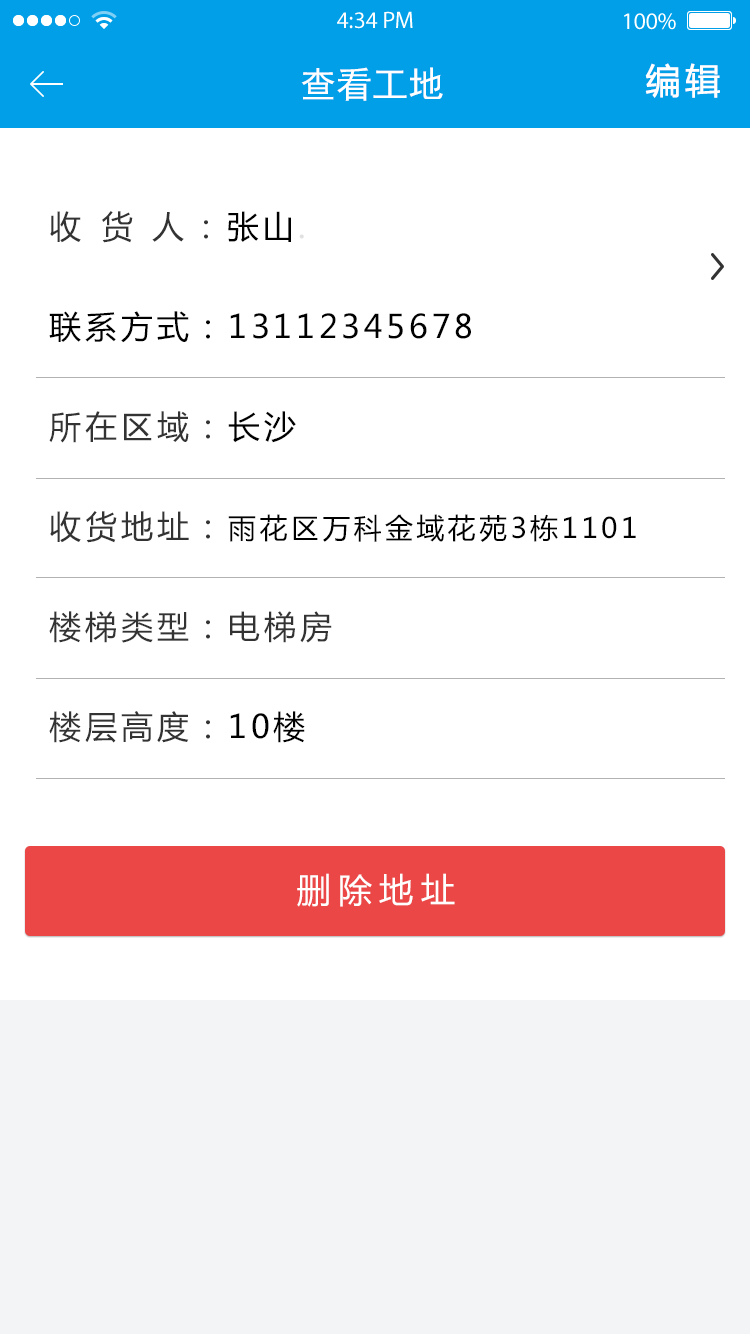
<style>
.page{position:relative;width:750px;height:1334px;background:#ffffff}
.page>*{position:absolute;margin:0}
.t1{font:35px "MicrosoftYaHei";letter-spacing:0.1em;color:#ffffff;font-weight:bold}
.t2{font:36px "SimHei";color:#ffffff}
.t3{font:32px/100px "MicrosoftYaHei";letter-spacing:0.12em;color:#000000}
.t4{font:32px/100px "MicrosoftYaHei";letter-spacing:0.16em;color:#333333}
.t5{font:32px/100px "MicrosoftYaHei";letter-spacing:0.12em;color:#e1e1e1}
.t6{font:32px/100px "MicrosoftYaHei";letter-spacing:0.12em;color:#333333}
.t7{font:28px/100px "MicrosoftYaHei";letter-spacing:0.12em;color:#000000}
.t8{font:34px "MicrosoftYaHei";letter-spacing:0.22em;color:#ffffff}
</style>
<div class="page">
<p class="t1" style="left:645px;top:63px;width:75px;height:35px">编辑</p>
<p class="t2" style="left:301px;top:67px;width:142px;height:34px">查看工地</p>
<p class="t3" style="left:49px;top:211px;width:587px;height:532px"><span class="t4">收 货 人：</span>张山<span class="t5">.   <br></span>联系方式：13112345678                 <br><span class="t6">所在区域：</span>长沙<br><span class="t6">收货地址：</span><span class="t7">雨花区万科金域花苑3栋1101<br></span><span class="t6">楼梯类型：电梯房  <br>楼层高度：</span>10楼</p>
<p class="t8" style="left:297px;top:873px;width:158px;height:34px">删除地址</p>
</div>
